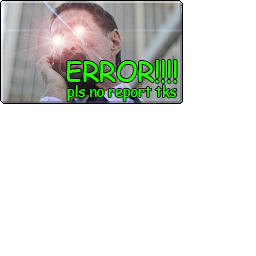
<style>
.page{position:relative;width:256px;height:256px;background:#ffffff}
.page>*{position:absolute;margin:0}
.t1{font:27.7px "ComicSansMS";letter-spacing:-0.02em;color:#26ff00}
.t2{font:14.7px "ComicSansMS";letter-spacing:-0.02em;color:#26ff00}
</style>
<div class="page">
<p class="t1" style="left:66px;top:60px;width:111px;height:23px">ERROR!!!!</p>
<p class="t2" style="left:67px;top:85px;width:110px;height:16px">pls no report tks</p>
</div>
